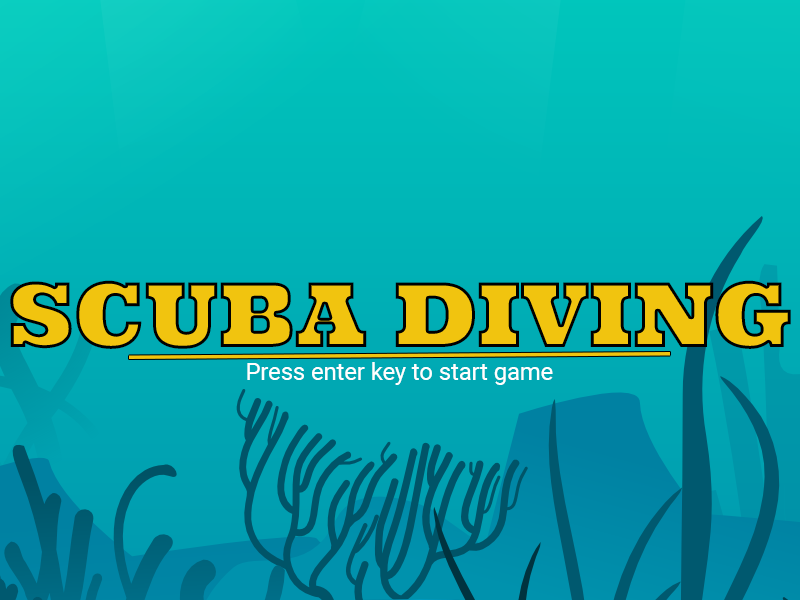
<style>
.page{position:relative;width:800px;height:600px}
.page>*{position:absolute;margin:0}
.t1{font:89.8px "Ultra";color:#f1c40f}
.t2{font:23.7px "Roboto-Regular";color:#ffffff}
</style>
<div class="page">
<p class="t1" style="left:10px;top:280px;width:781px;height:69px">SCUBA DIVING</p>
<p class="t2" style="left:247px;top:362px;width:306px;height:23px">Press enter key to start game</p>
</div>
